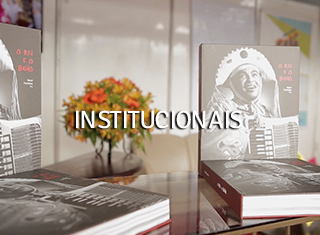
<style>
.page{position:relative;width:320px;height:235px}
.page>*{position:absolute;margin:0}
.t1{font:25px "Signika-Regular";letter-spacing:-0.01em;color:#ffffff}
</style>
<div class="page">
<p class="t1" style="left:76px;top:110px;width:167px;height:19px">INSTITUCIONAIS</p>
</div>
